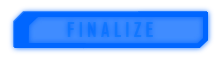
<style>
.page{position:relative;width:220px;height:60px;background:#ffffff}
.page>*{position:absolute;margin:0}
.t1{font:20px "AgencyFB-Bold";color:#1177ff}
</style>
<div class="page">
<p class="t1" style="left:67px;top:22px;width:86px;height:15px">F I N A L I Z E</p>
</div>
